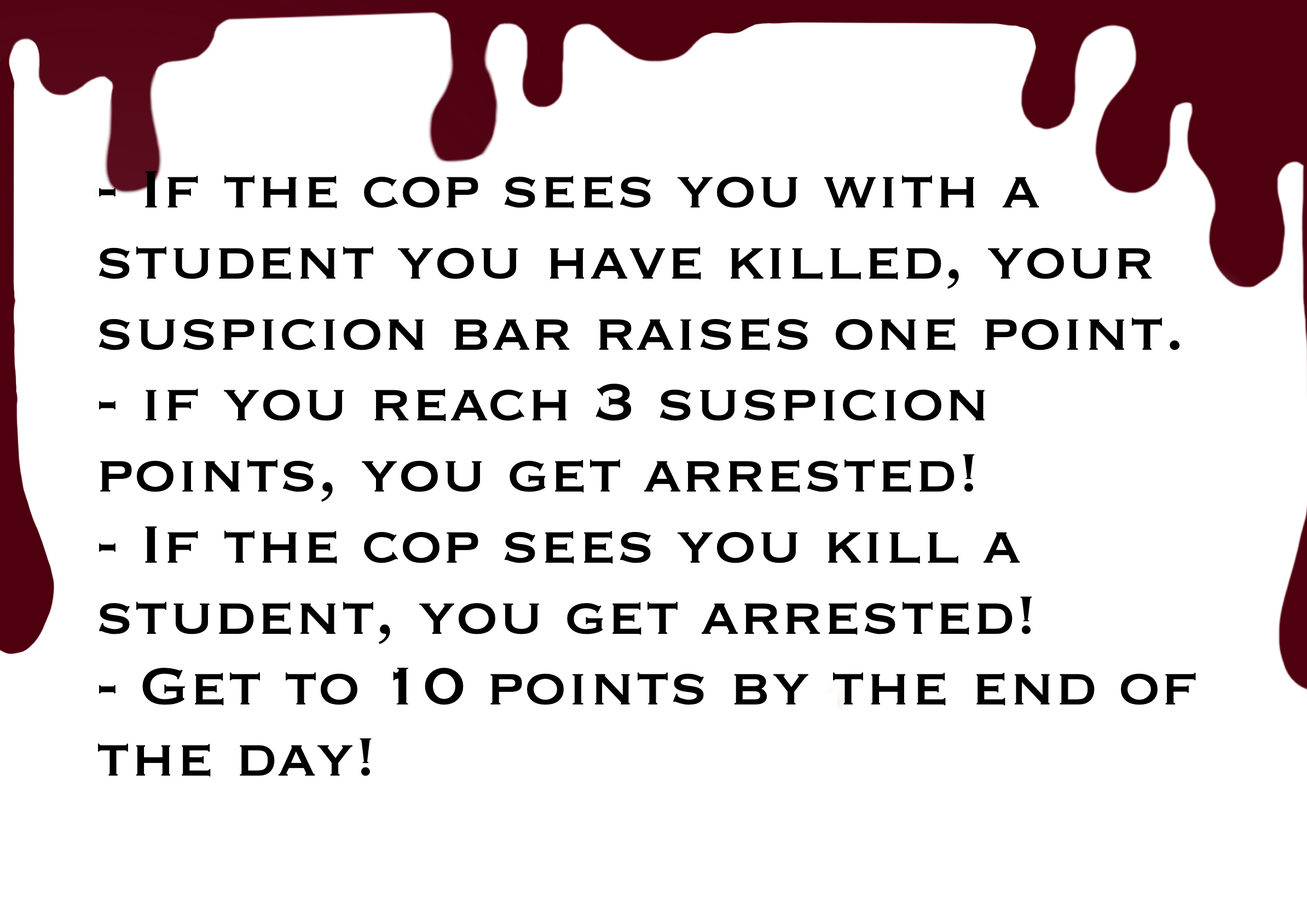
<style>
.page{position:relative;width:1307px;height:913px;background:#ffffff}
.page>*{position:absolute;margin:0}
.t1{font:68.9px "Copperplate";color:#000000}
.t2{font:68.9px "DINCondensed-Bold";color:#000000}
</style>
<div class="page">
<p class="t1" style="left:0px;top:0px;width:1307px;height:913px;text-align:center"><span class="t2"><br><br></span>- If the cop sees you with a student you have killed, your suspicion bar raises one point. <br>- if you reach 3 suspicion points, you get arrested!<br>- If the cop sees you kill a student, you get arrested!<br>- Get to 10 points by the end of the day!</p>
</div>
